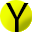
<style>
.page{position:relative;width:32px;height:32px}
.page>*{position:absolute;margin:0}
.t1{font:12px "MyriadPro-Regular";color:#000000}
</style>
<div class="page">
<p class="t1" style="left:6px;top:3px;width:23px;height:29px">Y</p>
</div>
